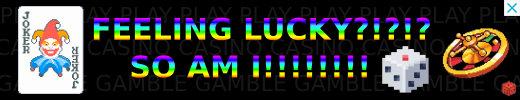
<style>
.page{position:relative;width:520px;height:100px;background:#000000}
.page>*{position:absolute;margin:0}
.t1{font:30px "MontserratRoman-ExtraBold"}
</style>
<div class="page">
<p class="t1" style="left:93px;top:17px;width:338px;height:24px">FEELING LUCKY?!?!?</p>
<p class="t1" style="left:131px;top:55px;width:236px;height:23px">SO AM I!!!!!!!!</p>
</div>
